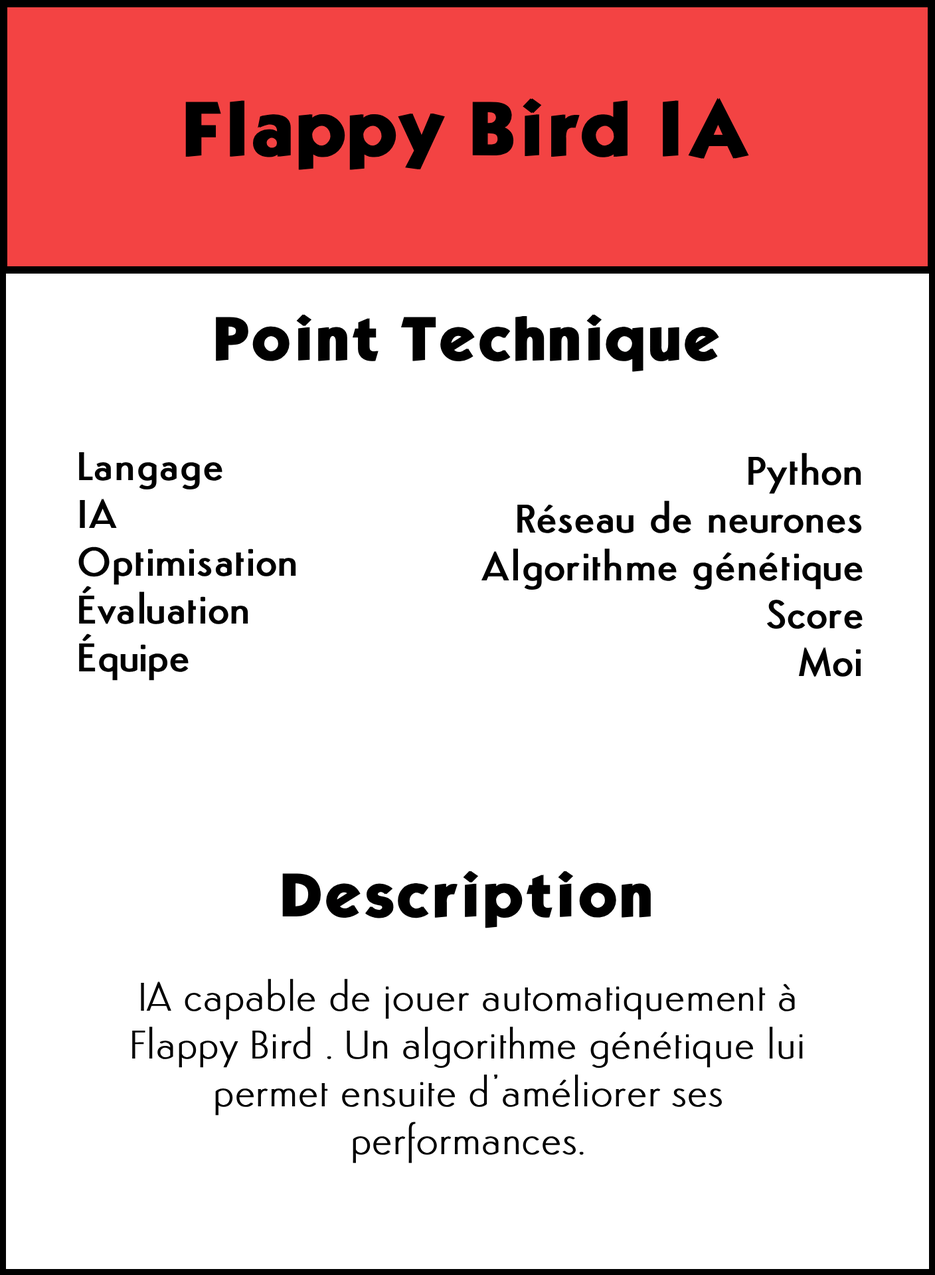
<style>
.page{position:relative;width:935px;height:1275px;background:#ffffff}
.page>*{position:absolute;margin:0}
.t1{font:66.4px "KabelBdNormal";color:#000000;font-weight:bold}
.t2{font:53.1px "KabelBdNormal";color:#000000;font-weight:bold}
.t3{font:39.8px "Semplicita-Medium";color:#000000;font-weight:bold}
.t4{font:39.8px "Semplicita-Light";color:#000000;font-weight:bold}
</style>
<div class="page">
<p class="t1" style="left:185px;top:98px;width:564px;height:72px">Flappy Bird IA</p>
<p class="t2" style="left:216px;top:314px;width:503px;height:58px">Point Technique</p>
<p class="t3" style="left:78px;top:452px;width:218px;height:229px">Langage<br>IA<br>Optimisation<br>Évaluation<br>Équipe</p>
<p class="t3" style="left:482px;top:453px;width:381px;height:224px;text-align:right">Python<br>Réseau de neurones<br>Algorithme génétique<br>Score<br>Moi</p>
<p class="t2" style="left:282px;top:871px;width:369px;height:57px">Description</p>
<p class="t4" style="left:132px;top:979px;width:671px;height:185px;text-align:center">IA capable de jouer automatiquement à Flappy Bird . Un algorithme génétique lui permet ensuite d’améliorer ses performances.</p>
</div>
